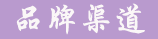
<style>
.page{position:relative;width:158px;height:39px;background:#b99ace}
.page>*{position:absolute;margin:0}
.t1{font:34px "STXingkai";color:#faf7f7}
</style>
<div class="page">
<p class="t1" style="left:16px;top:3px;width:129px;height:32px">品牌渠道</p>
</div>
